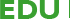
<style>
.page{position:relative;width:70px;height:19px;background:#ffffff}
.page>*{position:absolute;margin:0}
.t1{font:28px "GillSansMT-Bold";color:#39a030}
</style>
<div class="page">
<p class="t1" style="left:0px;top:0px;width:59px;height:19px">EDU</p>
</div>
